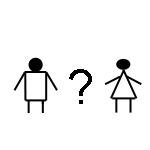
<style>
.page{position:relative;width:150px;height:150px;background:#ffffff}
.page>*{position:absolute;margin:0}
.t1{font:48px "ArialMT";color:#000000}
</style>
<div class="page">
<p class="t1" style="left:69px;top:69px;width:23px;height:35px">?</p>
</div>
